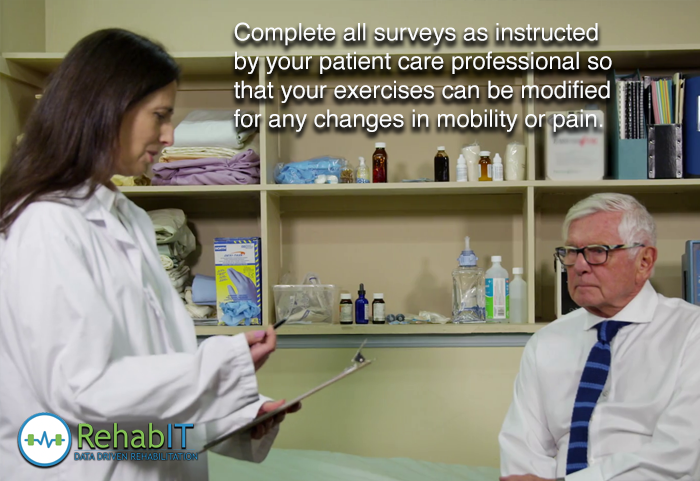
<style>
.page{position:relative;width:700px;height:481px}
.page>*{position:absolute;margin:0}
.t1{font:24px "Helvetica";color:#fbfcfd}
</style>
<div class="page">
<p class="t1" style="left:234px;top:22px;width:378px;height:110px">Complete all surveys as instructed<br>by your patient care professional so<br>that your exercises can be modified<br>for any changes in mobility or pain.</p>
</div>
